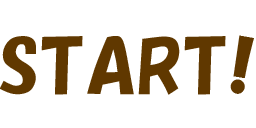
<style>
.page{position:relative;width:256px;height:128px;background:#ffffff}
.page>*{position:absolute;margin:0}
.t1{font:72px "HGPSoeiKakupoptai";letter-spacing:0.025em;color:#603800}
</style>
<div class="page">
<p class="t1" style="left:0px;top:35px;width:254px;height:60px">START!</p>
</div>
